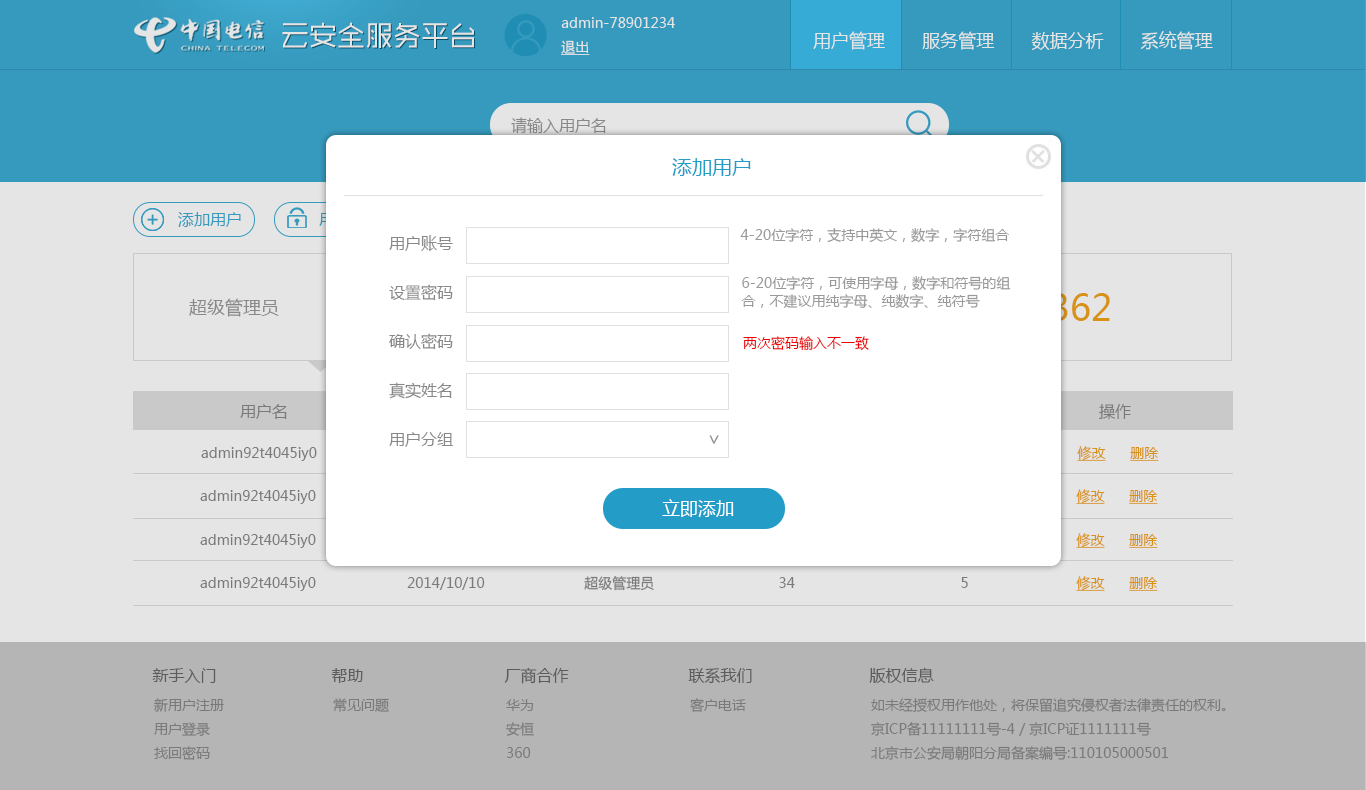
<style>
.page{position:relative;width:1366px;height:790px;background:#e5e5e5}
.page>*{position:absolute;margin:0}
.t1{font:14px/24px "MicrosoftYaHei";color:#e5e5e5}
.t2{font:14px/24px "MicrosoftYaHei";color:#e5e5e5;text-decoration:underline}
.t3{font:28px "MFShangHei_Noncommercial-Regular";color:#e5e5e5}
.t4{font:18px "MicrosoftYaHei";color:#e5e5e5}
.t5{font:16px "MicrosoftYaHei";color:#999999}
.t6{font:20px "MicrosoftYaHei";color:#239dc8}
.t7{font:16px "MicrosoftYaHei";color:#3cacd4}
.t8{font:14px "MicrosoftYaHei";color:#999999}
.t9{font:16px/49px "MicrosoftYaHei";color:#888888}
.t10{font:14px/18px "MicrosoftYaHei";color:#999999}
.t11{font:36px "MicrosoftYaHei";color:#d89217}
.t12{font:18px "MicrosoftYaHei"}
.t13{font:14px "MicrosoftYaHei";color:#ea0404}
.t14{font:18px "MicrosoftYaHei";color:#888888}
.t15{font:14px "MicrosoftYaHei"}
.t16{font:14px "MicrosoftYaHei";text-decoration:underline}
.t17{font:18px "MicrosoftYaHei";color:#ffffff}
.t18{font:14px "MicrosoftYaHei";color:#888888}
.t19{font:14px "MicrosoftYaHei";color:#f1a31a;text-decoration:underline}
.t20{font:16px "MicrosoftYaHei";color:#666666}
.t21{font:14px/24px "MicrosoftYaHei";color:#888888}
</style>
<div class="page">
<p class="t1" style="left:561px;top:17px;width:114px;height:38px">admin-78901234<br><span class="t2">退出</span></p>
<p class="t3" style="left:282px;top:22px;width:192px;height:26px">云安全服务平台</p>
<p class="t4" style="left:813px;top:31px;width:400px;height:19px">用户管理       服务管理       数据分析       系统管理</p>
<p class="t5" style="left:511px;top:117px;width:95px;height:17px">请输入用户名</p>
<p class="t6" style="left:672px;top:158px;width:79px;height:18px">添加用户</p>
<p class="t7" style="left:178px;top:212px;width:63px;height:15px">添加用户</p>
<p class="t8" style="left:740px;top:228px;width:269px;height:15px">4-20位字符，支持中英文，数字，字符组合</p>
<p class="t9" style="left:389px;top:235px;width:64px;height:212px">用户账号<br>设置密码<br>确认密码<br>真实姓名<br>用户分组</p>
<p class="t10" style="left:741px;top:276px;width:270px;height:33px">6-20位字符，可使用字母，数字和符号的组合，不建议用纯字母、纯数字、纯符号</p>
<p class="t11" style="left:1051px;top:293px;width:59px;height:28px">362</p>
<p class="t12" style="left:189px;top:298px;width:805px;height:19px">超级管理员                                                     系统管理员                                                   注册用户</p>
<p class="t13" style="left:743px;top:336px;width:126px;height:15px">两次密码输入不一致</p>
<p class="t14" style="left:709px;top:435px;width:10px;height:9px">&gt;</p>
<p class="t15" style="left:201px;top:446px;width:958px;height:15px">admin92t4045iy0                      2014/10/10                        超级管理员                              34                                        5                          <span class="t16">修改      删除</span></p>
<p class="t15" style="left:200px;top:489px;width:958px;height:15px">admin92t4045iy0                      2014/10/10                        超级管理员                              34                                        5                          <span class="t16">修改      删除</span></p>
<p class="t17" style="left:662px;top:499px;width:72px;height:18px">立即添加</p>
<p class="t15" style="left:200px;top:533px;width:958px;height:15px">admin92t4045iy0                      2014/10/10                        超级管理员                              34                                        5                          <span class="t16">修改      删除</span></p>
<p class="t18" style="left:200px;top:576px;width:958px;height:15px">admin92t4045iy0                      2014/10/10                        超级管理员                              34                                        5                          <span class="t19">修改      删除</span></p>
<p class="t20" style="left:152px;top:668px;width:64px;height:15px">新手入门</p>
<p class="t20" style="left:331px;top:668px;width:32px;height:15px">帮助</p>
<p class="t20" style="left:504px;top:667px;width:65px;height:17px">厂商合作</p>
<p class="t20" style="left:688px;top:668px;width:64px;height:16px">联系我们</p>
<p class="t20" style="left:869px;top:667px;width:65px;height:16px">版权信息</p>
<p class="t21" style="left:154px;top:698px;width:70px;height:62px">新用户注册<br>用户登录<br>找回密码</p>
<p class="t18" style="left:333px;top:698px;width:56px;height:14px">常见问题</p>
<p class="t21" style="left:506px;top:699px;width:28px;height:59px">华为<br>安恒<br>360</p>
<p class="t18" style="left:690px;top:698px;width:56px;height:14px">客户电话</p>
<p class="t21" style="left:871px;top:698px;width:355px;height:63px">如未经授权用作他处，将保留追究侵权者法律责任的权利。<br>京ICP备11111111号-4 / 京ICP证1111111号<br>北京市公安局朝阳分局备案编号:110105000501</p>
</div>
